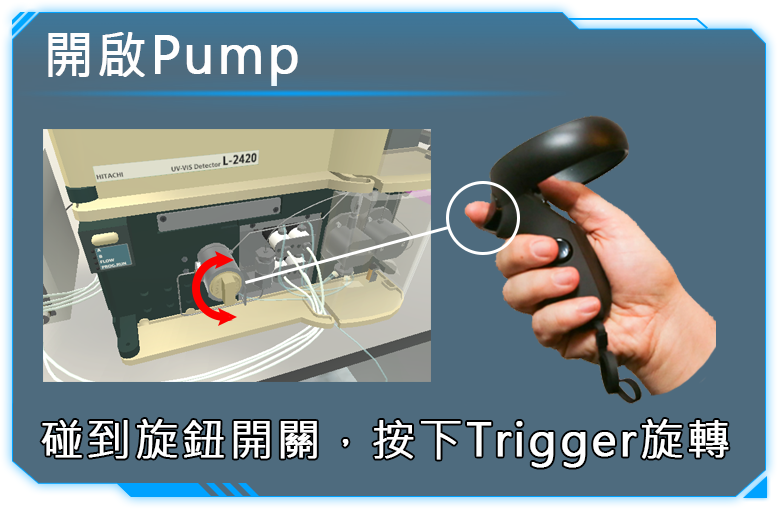
<style>
.page{position:relative;width:778px;height:509px;background:#4e6b7e}
.page>*{position:absolute;margin:0}
.t1{font:49.5px "MicrosoftJhengHeiRegular";letter-spacing:0.05em;color:#fefefe;font-weight:bold}
.t2{font:44px "MicrosoftJhengHeiRegular";letter-spacing:0.05em;color:#fefefe;font-weight:bold}
</style>
<div class="page">
<p class="t1" style="left:48px;top:32px;width:250px;height:54px">開啟Pump</p>
<p class="t2" style="left:41px;top:419px;width:688px;height:49px">碰到旋鈕開關，按下Trigger旋轉</p>
</div>
